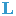
<style>
.page{position:relative;width:16px;height:16px;background:#ffffff}
.page>*{position:absolute;margin:0}
.t1{font:18.7px "TimesNewRomanPS-BoldMT";color:#3399cc}
</style>
<div class="page">
<p class="t1" style="left:2px;top:2px;width:11px;height:12px">L</p>
</div>
